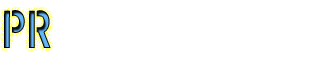
<style>
.page{position:relative;width:320px;height:60px;background:#ffffff}
.page>*{position:absolute;margin:0}
.t1{font:52.7px "XXIISTRAIGHT-ARMY"}
</style>
<div class="page">
<p class="t1" style="left:4px;top:10px;width:47px;height:38px">PR</p>
</div>
